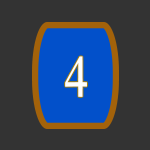
<style>
.page{position:relative;width:150px;height:150px;background:#333333}
.page>*{position:absolute;margin:0}
.t1{font:62.5px "TimesNewRomanPSMT";letter-spacing:0.1em;color:#ffffff;scale:0.75 1}
</style>
<div class="page">
<p class="t1" style="left:65px;top:56px;width:22px;height:41px">4</p>
</div>
